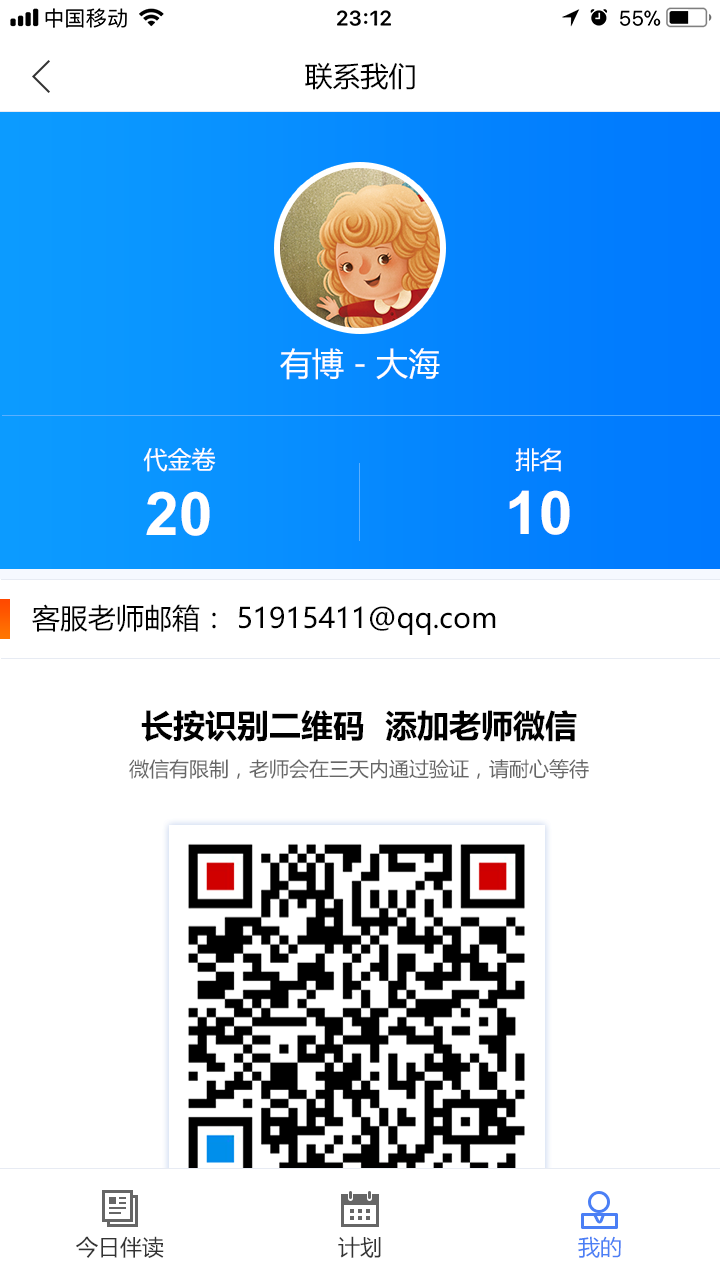
<style>
.page{position:relative;width:720px;height:1280px;background:#ffffff}
.page>*{position:absolute;margin:0}
.t1{font:28px "MicrosoftYaHei";color:#000000}
.t2{font:32px "MicrosoftYaHei";color:#ffffff}
.t3{font:24px "MicrosoftYaHei";color:#ffffff}
.t4{font:60px "Arial-BoldMT";color:#ffffff}
.t5{font:32px "MicrosoftYaHei-Bold";color:#000000}
.t6{font:20px "MicrosoftYaHei";color:#666666}
.t7{font:22px "MicrosoftYaHei";color:#333333}
.t8{font:22px "MicrosoftYaHei";color:#4b7ff5}
</style>
<div class="page">
<p class="t1" style="left:305px;top:62px;width:110px;height:28px">联系我们</p>
<p class="t2" style="left:280px;top:348px;width:160px;height:32px">有博 - 大海</p>
<p class="t3" style="left:143px;top:447px;width:73px;height:25px">代金卷</p>
<p class="t3" style="left:515px;top:448px;width:46px;height:24px">排名</p>
<p class="t4" style="left:146px;top:491px;width:64px;height:45px">20</p>
<p class="t4" style="left:509px;top:490px;width:61px;height:45px">10</p>
<p class="t1" style="left:32px;top:604px;width:464px;height:31px">客服老师邮箱： 51915411@qq.com</p>
<p class="t5" style="left:141px;top:710px;width:436px;height:32px">长按识别二维码  添加老师微信</p>
<p class="t6" style="left:129px;top:759px;width:460px;height:20px">微信有限制，老师会在三天内通过验证，请耐心等待</p>
<p class="t7" style="left:76px;top:1236px;width:88px;height:22px">今日伴读</p>
<p class="t7" style="left:338px;top:1236px;width:43px;height:22px">计划</p>
<p class="t8" style="left:578px;top:1236px;width:43px;height:22px">我的</p>
</div>
